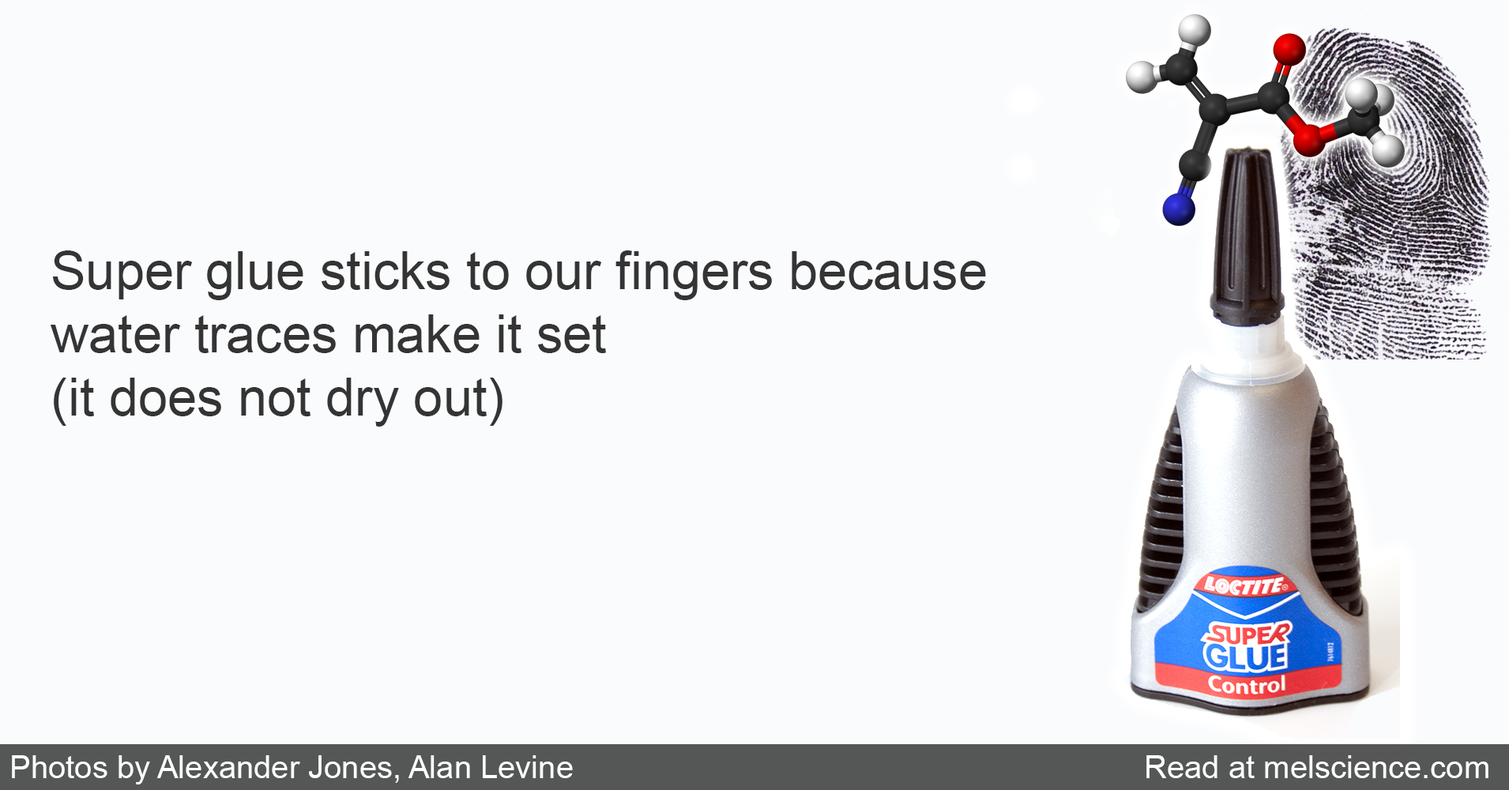
<style>
.page{position:relative;width:1509px;height:790px;background:#fafbfd}
.page>*{position:absolute;margin:0}
.t1{font:52.7px "ArialMT";color:#343434}
.t2{font:36.9px "Arial-BoldMT";color:#194167}
.t3{font:31.6px "ArialMT";color:#ffffff}
</style>
<div class="page">
<p class="t1" style="left:51px;top:250px;width:935px;height:177px"><span class="t2"><br></span><br><br>Super glue sticks to our fingers because<br>water traces make it set <br>(it does not dry out)</p>
<p class="t3" style="left:12px;top:755px;width:561px;height:30px">Photos by Alexander Jones, Alan Levine</p>
<p class="t3" style="left:1146px;top:755px;width:343px;height:23px">Read at melscience.com</p>
</div>
